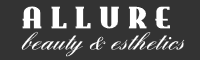
<style>
.page{position:relative;width:200px;height:60px;background:#333333}
.page>*{position:absolute;margin:0}
.t1{font:30px "EastMarket";color:#ffffff}
.t2{font:26px "EnglandHandDB";color:#ffffff}
</style>
<div class="page">
<p class="t1" style="left:22px;top:6px;width:148px;height:23px">A L L U R E</p>
<p class="t2" style="left:21px;top:31px;width:164px;height:26px">beauty &amp; esthetics</p>
</div>
